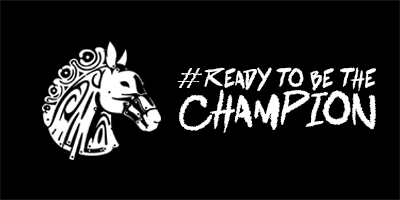
<style>
.page{position:relative;width:400px;height:200px;background:#000000}
.page>*{position:absolute;margin:0}
.t1{font:32.5px "BlackadderITC-Regular";color:#ffffff;scale:1.04 1}
.t2{font:23.2px "battlebreath";color:#ffffff}
.t3{font:42.5px "battlebreath";color:#ffffff}
</style>
<div class="page">
<p class="t1" style="left:178px;top:68px;width:24px;height:20px">#</p>
<p class="t2" style="left:204px;top:67px;width:172px;height:24px">ready to be the</p>
<p class="t3" style="left:179px;top:89px;width:197px;height:44px">champion</p>
</div>
